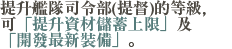
<style>
.page{position:relative;width:232px;height:49px;background:#ffffff}
.page>*{position:absolute;margin:0}
.t1{font:16px/16px "RyuminPr6N-ExBold";color:#4c4841}
.t2{font:16px/16px "RyuminPr6N-ExBold";color:#567c7b}
</style>
<div class="page">
<p class="t1" style="left:0px;top:0px;width:206px;height:48px">提升艦隊司令部(提督)的等級，<br>可<span class="t2">「提升資材儲蓄上限」</span>及<br><span class="t2">「開發最新裝備」</span>。</p>
</div>
